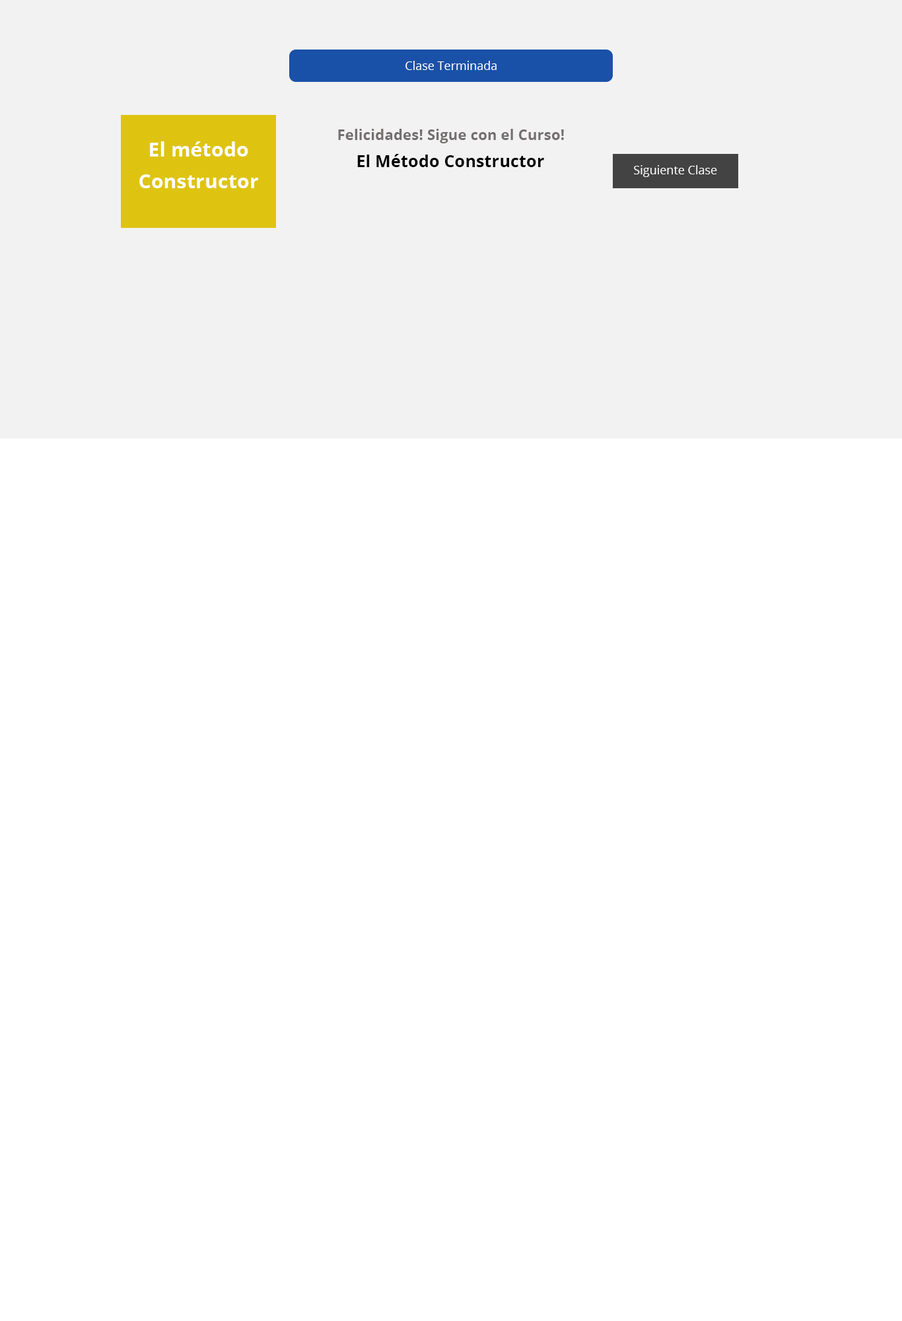
<style>
.page{position:relative;width:902px;height:1321px;background:#ffffff}
.page>*{position:absolute;margin:0}
.t1{font:11.9px "OpenSans-Regular";color:#ffffff}
.t2{font:14.5px "OpenSans-Bold";letter-spacing:0.01em;color:#736f6f}
.t3{font:19.8px/4px "OpenSans-Bold";letter-spacing:0.01em;color:#fefefe}
.t4{font:16.5px "OpenSans-Bold";letter-spacing:0.01em;color:#010101}
.t5{font:11.9px "OpenSans-Regular";color:#fefefe}
</style>
<div class="page">
<p class="t1" style="left:406px;top:61px;width:91px;height:9px">Clase Terminada</p>
<p class="t2" style="left:338px;top:129px;width:226px;height:14px">Felicidades! Sigue con el Curso!</p>
<p class="t3" style="left:139px;top:141px;width:119px;height:47px;text-align:center">El método <br><br><br><br><br><br><br><br>Constructor</p>
<p class="t4" style="left:357px;top:154px;width:187px;height:13px">El Método Constructor</p>
<p class="t5" style="left:634px;top:165px;width:83px;height:12px">Siguiente Clase</p>
</div>
